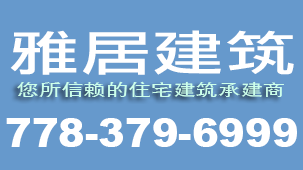
<style>
.page{position:relative;width:303px;height:170px;background:#6699cc}
.page>*{position:absolute;margin:0}
.t1{font:48px "LiHeiPro";color:#ffffff;scale:1.5 1}
.t2{font:16px "SIL-Hei-Med-Jian";color:#ccffeb;scale:1.4 1}
.t3{font:40px "Arial-Black";color:#ffffff}
</style>
<div class="page">
<p class="t1" style="left:10px;top:30px;width:284px;height:45px">雅居建筑</p>
<p class="t2" style="left:17px;top:81px;width:267px;height:16px">您所信赖的住宅建筑承建商</p>
<p class="t3" style="left:6px;top:118px;width:291px;height:29px">778-379-6999</p>
</div>
